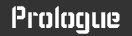
<style>
.page{position:relative;width:132px;height:36px;background:#333333}
.page>*{position:absolute;margin:0}
.t1{font:36px "KarismaStencil";color:#ffffff}
</style>
<div class="page">
<p class="t1" style="left:12px;top:6px;width:108px;height:28px">Prologue</p>
</div>
